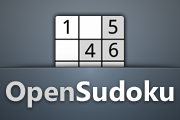
<style>
.page{position:relative;width:180px;height:120px}
.page>*{position:absolute;margin:0}
.t1{font:28px "SegoeUI-Bold";color:#ffffff}
.t2{font:28px "SegoeUI-Bold";color:#d5d5d5}
</style>
<div class="page">
<p class="t1" style="left:6px;top:80px;width:168px;height:28px"><span class="t2">Open</span>Sudoku</p>
</div>
